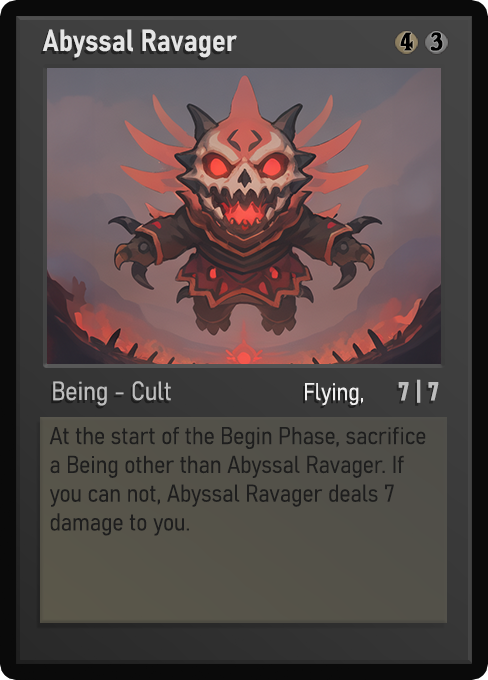
<style>
.page{position:relative;width:488px;height:680px}
.page>*{position:absolute;margin:0}
.t1{font:30px "Bahnschrift-SemiBoldSemiCondensed";color:#f2f2f2;font-weight:bold}
.t2{font:25px "WTRRoycroft";color:#000000;font-weight:bold;scale:1.09 1}
.t3{font:26px "Bahnschrift-LightSemiCondensed";color:#c8c8c8;font-weight:bold}
.t4{font:24px "Bahnschrift-LightSemiCondensed";color:#f0efef;font-weight:bold}
.t5{font:26px "Bahnschrift-BoldSemiCondensed";color:#bdbdbd;font-weight:bold}
.t6{font:24px "Bahnschrift-LightSemiCondensed";color:#1e1e1e;font-weight:bold}
</style>
<div class="page">
<p class="t1" style="left:42px;top:29px;width:195px;height:29px;opacity:0.9">Abyssal Ravager</p>
<p class="t2" style="left:400px;top:32px;width:13px;height:19px">4</p>
<p class="t2" style="left:430px;top:32px;width:13px;height:19px">3</p>
<p class="t3" style="left:53px;top:381px;width:118px;height:25px;opacity:0.9">Being - Cult</p>
<p class="t4" style="left:305px;top:383px;width:58px;height:23px">Flying, Stampede</p>
<p class="t5" style="left:398px;top:379px;width:41px;height:24px">7 | 7</p>
<p class="t6" style="left:49px;top:427px;width:377px;height:109px">At the start of the Begin Phase, sacrifice a Being other than Abyssal Ravager. If you can not, Abyssal Ravager deals 7 damage to you.</p>
</div>
